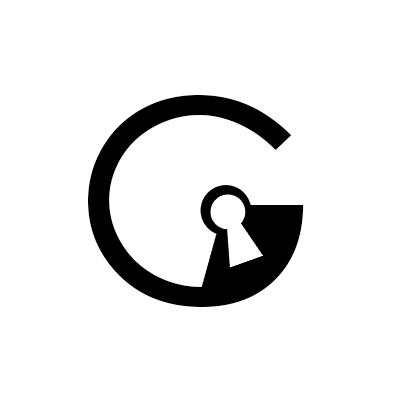
<style>
.page{position:relative;width:400px;height:400px;background:#ffffff}
.page>*{position:absolute;margin:0}
.t1{font:280.5px "CenturyGothic";letter-spacing:0.5em;color:#000000}
</style>
<div class="page">
<p class="t1" style="left:88px;top:95px;width:216px;height:212px">G</p>
</div>
